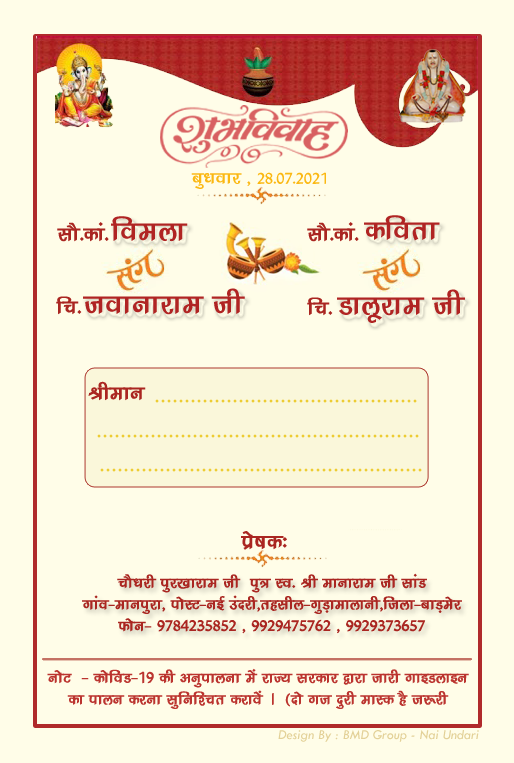
<style>
.page{position:relative;width:514px;height:763px;background:#fffde8}
.page>*{position:absolute;margin:0}
.t1{font:18.4px "KrutiDev240";color:#fbb812}
.t2{font:21px "KrutiDev240";color:#fbb812}
.t3{font:24px "KrutiDev240";color:#aa2621}
.t4{font:34px "KrutiDev240";color:#b02423}
.t5{font:24px "TimesNewRomanPSMT";color:#edcc33}
.t6{font:25px "KrutiDev240";color:#aa2621}
.t7{font:18px "KrutiDev240";color:#aa2621}
.t8{font:18px "KrutiDev240";color:#bb342f}
.t9{font:14px "TwCenMT-Italic";color:#e3d198}
</style>
<div class="page">
<p class="t1" style="left:191px;top:172px;width:135px;height:17px"><span class="t2"> cqèkokj ]</span> 28-07-2021</p>
<p class="t3" style="left:57px;top:222px;width:52px;height:20px">lkS-dka-</p>
<p class="t4" style="left:111px;top:216px;width:77px;height:26px">foeyk</p>
<p class="t3" style="left:307px;top:222px;width:52px;height:20px">lkS-dka-</p>
<p class="t4" style="left:364px;top:215px;width:76px;height:26px">dfork</p>
<p class="t4" style="left:83px;top:288px;width:162px;height:27px">tokukjke th</p>
<p class="t4" style="left:337px;top:289px;width:128px;height:34px">Mkywjke th</p>
<p class="t3" style="left:56px;top:296px;width:26px;height:19px">fp-</p>
<p class="t3" style="left:307px;top:297px;width:26px;height:19px">fp-</p>
<p class="t3" style="left:88px;top:381px;width:58px;height:20px">Jheku</p>
<p class="t5" style="left:155px;top:399px;width:262px;height:4px">............................................</p>
<p class="t5" style="left:97px;top:434px;width:322px;height:4px">......................................................</p>
<p class="t5" style="left:100px;top:468px;width:322px;height:4px">......................................................</p>
<p class="t6" style="left:241px;top:531px;width:46px;height:19px">çs"kd%</p>
<p class="t7" style="left:82px;top:573px;width:380px;height:61px;text-align:center">pkSèkjh iqj[kkjke th  iq= Lo- Jh ekukjke th lkaM<br>xkao&amp;ekuiqjk] iksLV&amp;ubZ manjh]rglhy&amp;xqM+kekykuh]ftyk&amp;ckM+esj<br>Qksu&amp; 9784235852 ] 9929475762 ] 9929373657</p>
<p class="t8" style="left:47px;top:668px;width:422px;height:41px;text-align:center">uksV  &amp; dksfoM&amp;19 dh vuqikyuk esa jkT; ljdkj }kjk tkjh xkbMykbu<br>dk ikyu djuk lqfuf'pr djkosa A  ¼nks xt nqjh ekLd gS t:jh</p>
<p class="t9" style="left:278px;top:730px;width:201px;height:12px">Design By : BMD Group - Nai Undari</p>
</div>
